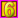
<style>
.page{position:relative;width:18px;height:18px}
.page>*{position:absolute;margin:0}
.t1{font:21.6px "SimHei";font-weight:bold}
</style>
<div class="page">
<p class="t1" style="left:4px;top:2px;width:10px;height:16px">6</p>
</div>
